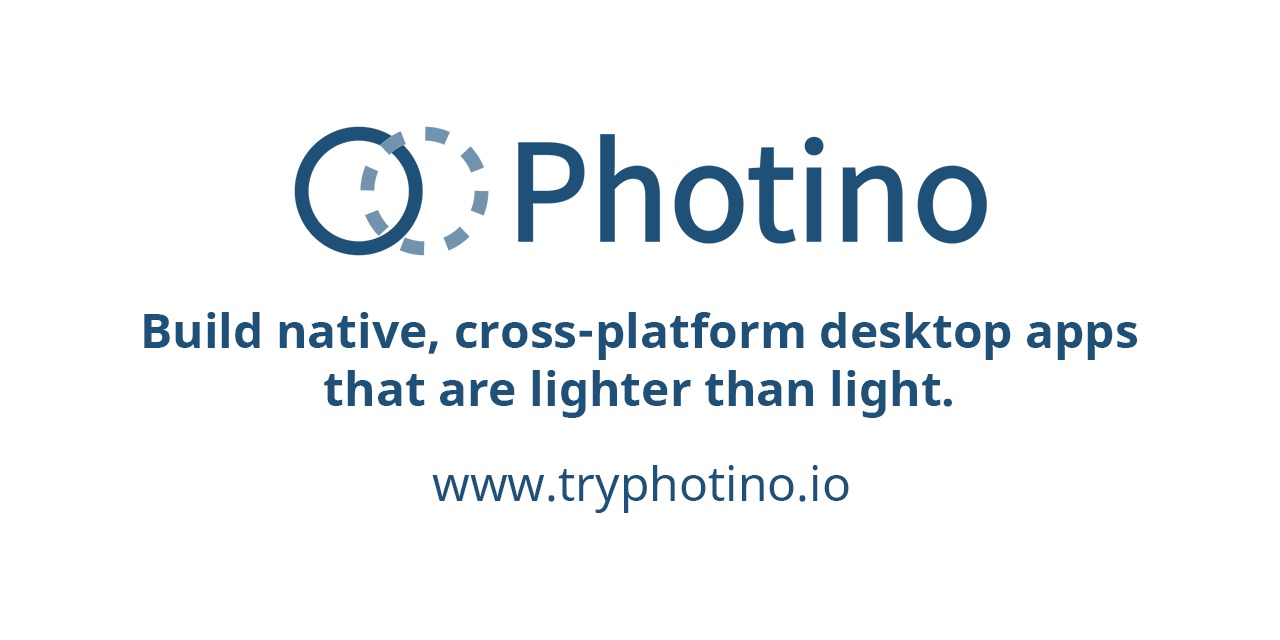
<style>
.page{position:relative;width:1280px;height:640px;background:#ffffff}
.page>*{position:absolute;margin:0}
.t1{font:48px "NotoSans-Bold";color:#1e5078}
.t2{font:48px "NotoSans";color:#1e5078}
</style>
<div class="page">
<p class="t1" style="left:144px;top:312px;width:993px;height:106px;text-align:center">Build native, cross-platform desktop apps<br>that are lighter than light.</p>
<p class="t2" style="left:432px;top:465px;width:417px;height:48px">www.tryphotino.io</p>
</div>
